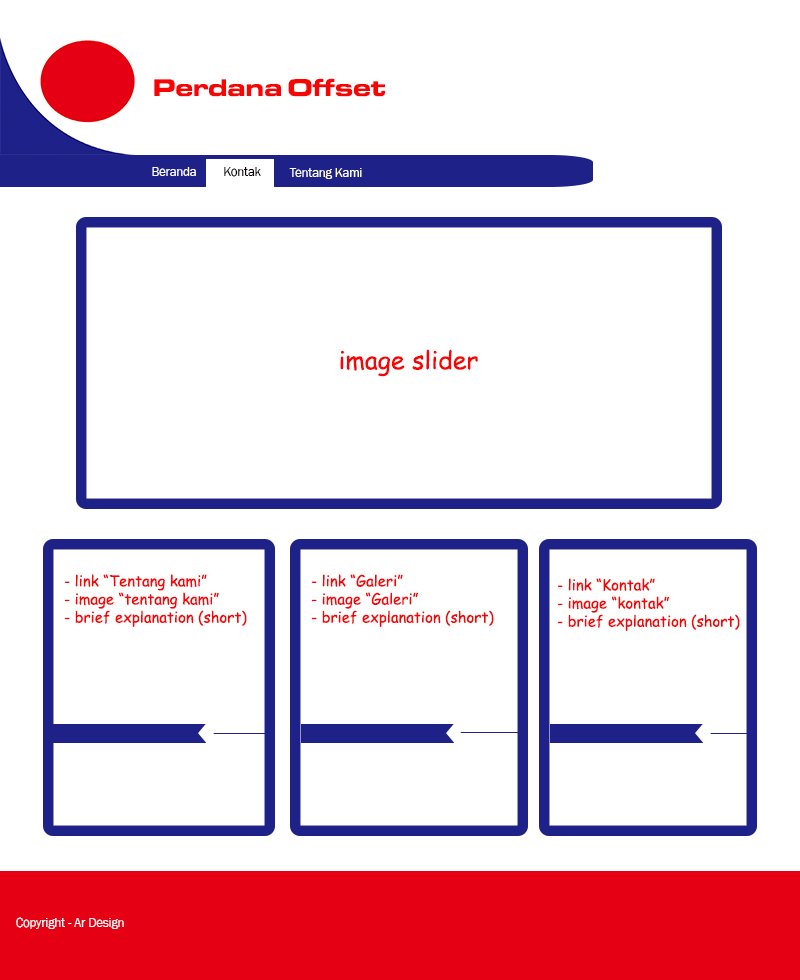
<style>
.page{position:relative;width:800px;height:980px;background:#ffffff}
.page>*{position:absolute;margin:0}
.t1{font:25px "EurostileMN-ExtendedBold";color:#f90303}
.t2{font:12.5px "FranklinGothic-Book";color:#fcfcfc}
.t3{font:12.5px "FranklinGothic-Book";color:#060000}
.t4{font:25px "ComicSansMS";color:#f90303}
.t5{font:15.1px "ComicSansMS";color:#f90303}
.t6{font:12.5px "FranklinGothic-Book";color:#fcf9f9}
</style>
<div class="page">
<p class="t1" style="left:154px;top:78px;width:231px;height:19px">Perdana Offset</p>
<p class="t2" style="left:152px;top:167px;width:44px;height:9px">Beranda</p>
<p class="t3" style="left:224px;top:167px;width:37px;height:10px">Kontak</p>
<p class="t2" style="left:289px;top:168px;width:73px;height:11px">Tentang Kami</p>
<p class="t4" style="left:340px;top:349px;width:138px;height:28px">image slider</p>
<p class="t5" style="left:64px;top:574px;width:183px;height:53px">- link “Tentang kami”<br>- image “tentang kami”<br>- brief explanation (short)</p>
<p class="t5" style="left:311px;top:574px;width:183px;height:53px">- link “Galeri”<br>- image “Galeri”<br>- brief explanation (short)</p>
<p class="t5" style="left:557px;top:578px;width:183px;height:53px">- link “Kontak”<br>- image “kontak”<br>- brief explanation (short)</p>
<p class="t6" style="left:16px;top:917px;width:108px;height:12px">Copyright - Ar Design</p>
</div>
